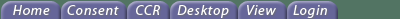
<style>
.page{position:relative;width:400px;height:19px;background:#527463}
.page>*{position:absolute;margin:0}
.t1{font:13.6px "MyriadPro-It";letter-spacing:0.05em;color:#ffffff;scale:1.05 1}
</style>
<div class="page">
<p class="t1" style="left:13px;top:4px;width:325px;height:14px">Home     Consent     CCR     Desktop     View     Login</p>
</div>
